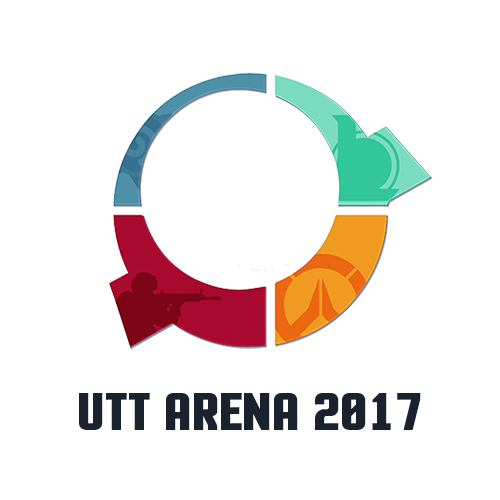
<style>
.page{position:relative;width:500px;height:500px;background:#ffffff}
.page>*{position:absolute;margin:0}
.t1{font:64px "MotionControl-Bold";color:#19222d}
</style>
<div class="page">
<p class="t1" style="left:79px;top:393px;width:342px;height:37px">UTT ARENA 2017</p>
</div>
